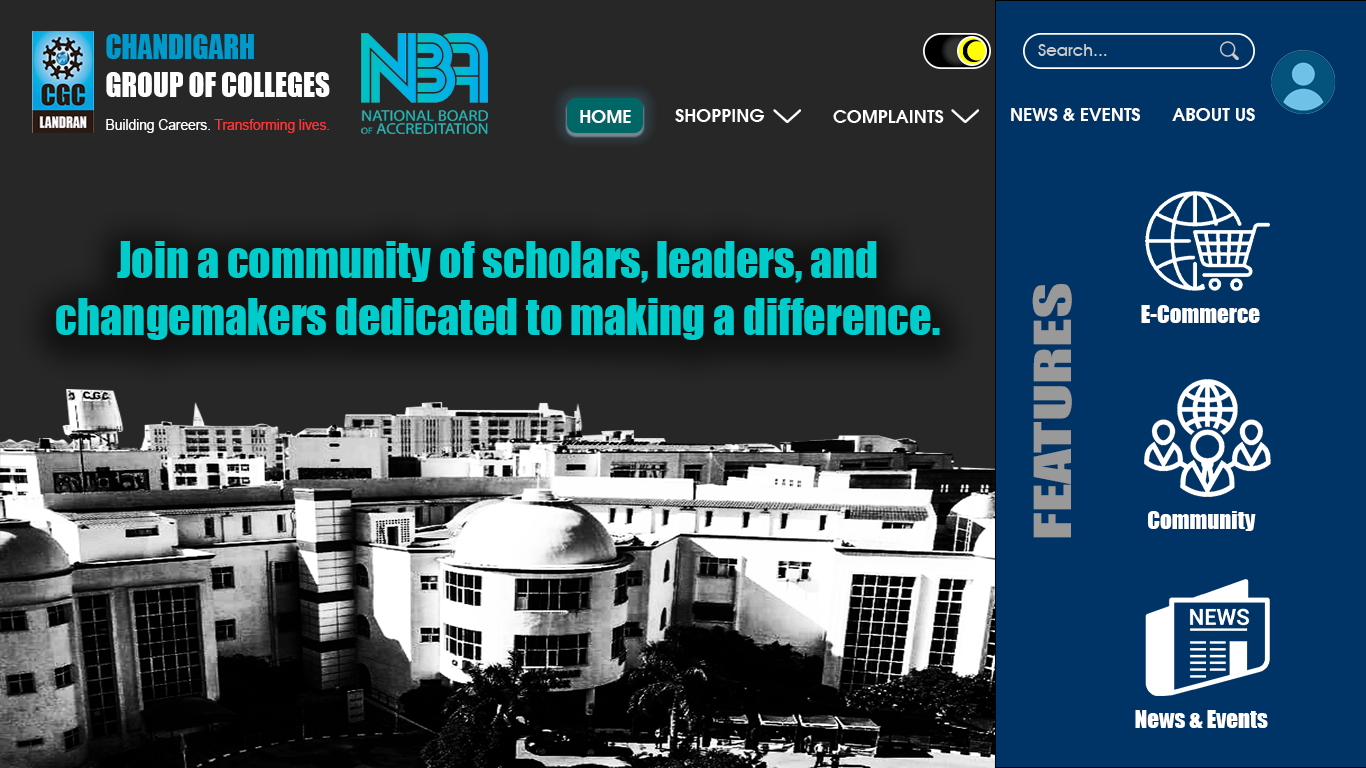
<style>
.page{position:relative;width:1366px;height:768px;background:#003366}
.page>*{position:absolute;margin:0}
.t1{font:31.6px "Impact";color:#ffffff;scale:0.92 1}
.t2{font:31.6px "Impact";color:#0099cc;scale:0.92 1}
.t3{font:17.8px "AvalonBold";color:#ffffff}
.t4{font:15px "ArialMT";color:#ff3333;scale:0.92 1}
.t5{font:15px "ArialMT";color:#ffffff;scale:0.92 1}
.t6{font:47.1px "Impact";color:#00cccc;scale:0.94 1}
.t7{font:47.4px "Impact";color:#999999;scale:1.45 1}
.t8{font:23px "Impact";color:#ffffff}
</style>
<div class="page">
<p class="t1" style="left:106px;top:34px;width:224px;height:63px"><span class="t2">CHANDIGARH<br></span>GROUP OF COLLEGES</p>
<p class="t3" style="left:580px;top:110px;width:51px;height:13px">HOME</p>
<p class="t3" style="left:1011px;top:108px;width:129px;height:13px">NEWS &amp; EVENTS</p>
<p class="t3" style="left:1172px;top:108px;width:83px;height:13px">ABOUT US</p>
<p class="t4" style="left:106px;top:119px;width:223px;height:14px"><span class="t5">Building Careers. </span>Transforming lives.</p>
<p class="t6" style="left:56px;top:241px;width:884px;height:99px;text-align:center">Join a community of scholars, leaders, and changemakers dedicated to making a difference.</p>
<p class="t7" style="left:1032px;top:284px;width:40px;height:254px;rotate:-90deg">FEATURES</p>
<p class="t8" style="left:1141px;top:305px;width:119px;height:18px">E-Commerce</p>
<p class="t8" style="left:1148px;top:511px;width:108px;height:20px">Community</p>
<p class="t8" style="left:1135px;top:710px;width:133px;height:18px">News &amp; Events</p>
</div>
